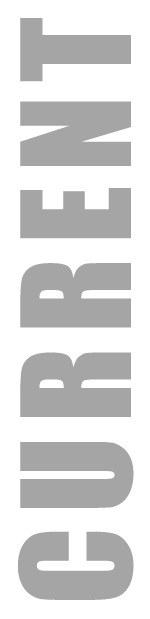
<style>
.page{position:relative;width:150px;height:619px;background:#ffffff}
.page>*{position:absolute;margin:0}
.t1{font:140px "Impact";letter-spacing:0.1em;color:#a5a5a5}
</style>
<div class="page">
<p class="t1" style="left:18px;top:18px;width:116px;height:582px;rotate:-90deg">CURRENT</p>
</div>
